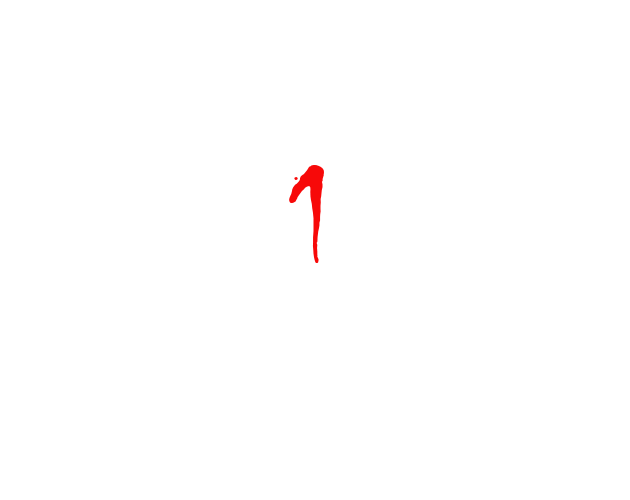
<style>
.page{position:relative;width:630px;height:500px;background:#ffffff}
.page>*{position:absolute;margin:0}
.t1{font:138.9px "Chiller-Regular";color:#f80909}
</style>
<div class="page">
<p class="t1" style="left:289px;top:165px;width:35px;height:98px">1</p>
</div>
